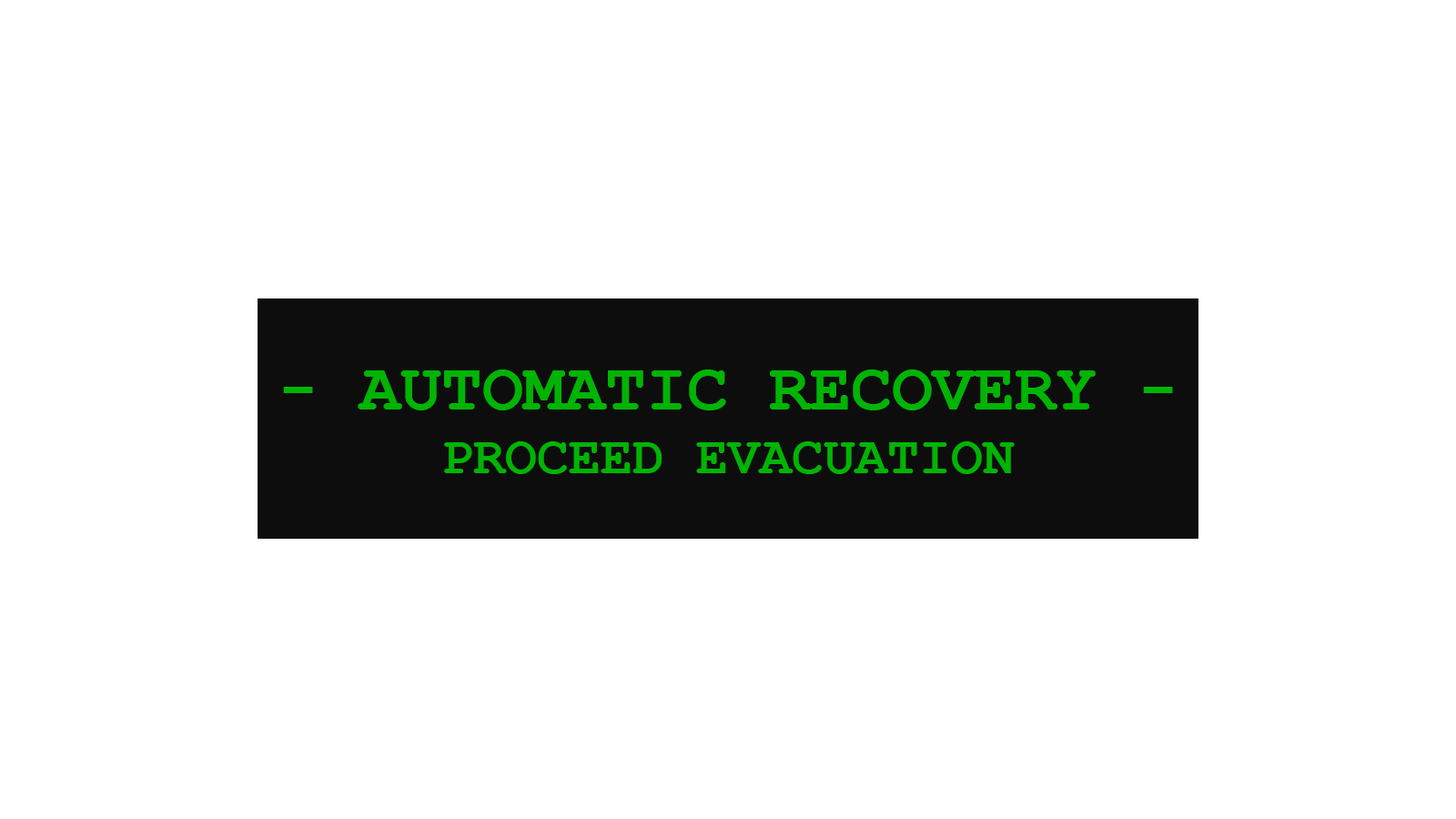
<style>
.page{position:relative;width:1456px;height:819px;background:#ffffff}
.page>*{position:absolute;margin:0}
.t1{font:68.2px "CourierNewPS-BoldMT";color:#00b403}
.t2{font:53.1px "CourierNewPS-BoldMT";color:#00b403}
</style>
<div class="page">
<p class="t1" style="left:283px;top:369px;width:890px;height:105px;text-align:center">- AUTOMATIC RECOVERY -<br><span class="t2">PROCEED EVACUATION</span></p>
</div>
